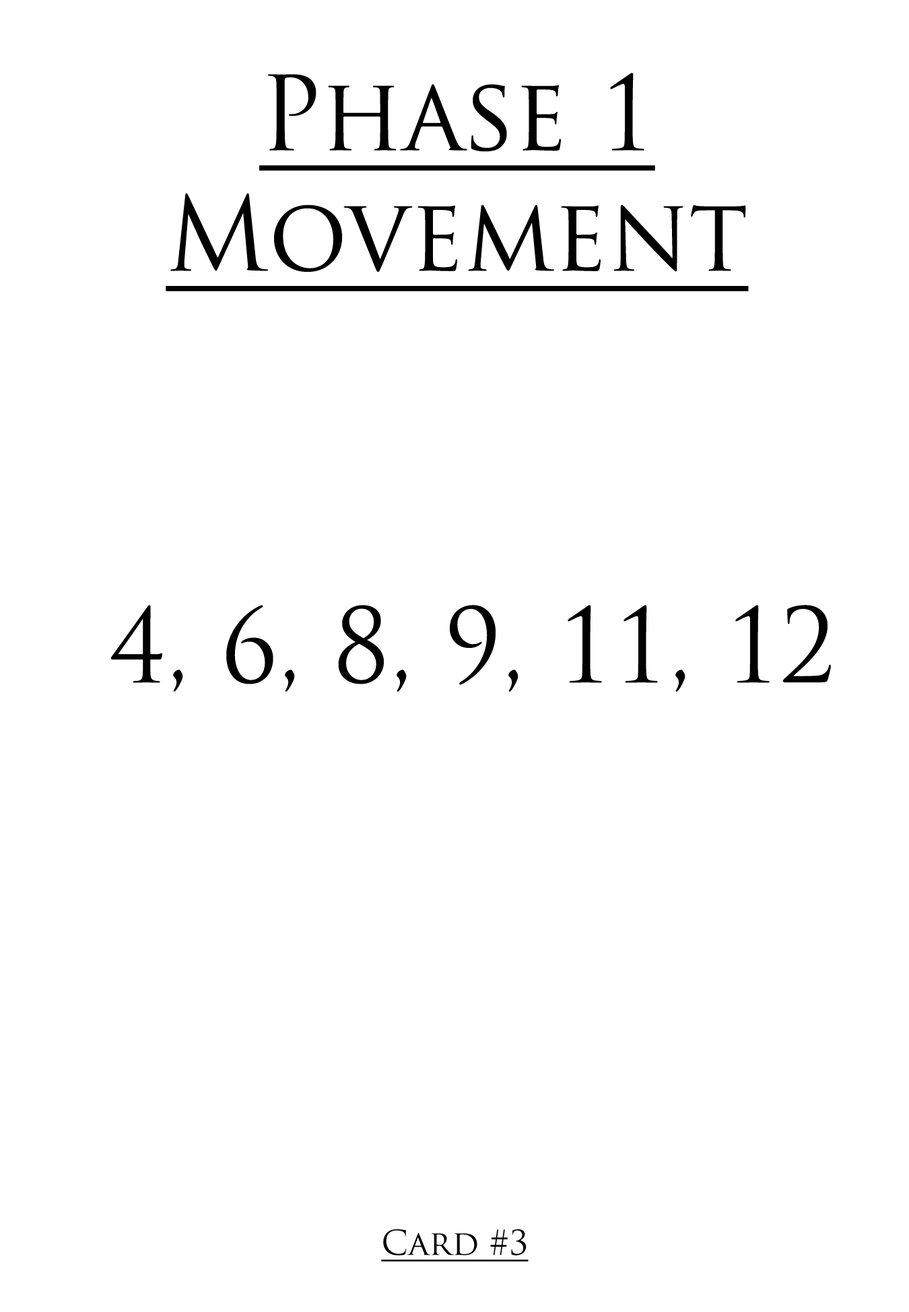
<style>
.page{position:relative;width:909px;height:1312px;background:#ffffff}
.page>*{position:absolute;margin:0}
.t1{font:100.6px "TrajanPro-Regular";color:#000000;text-decoration:underline;scale:0.97 1}
.t2{font:100.6px "TrajanPro-Regular";color:#000000;scale:0.97 1}
.t3{font:33.5px "TrajanPro-Regular";color:#000000;text-decoration:underline}
</style>
<div class="page">
<p class="t1" style="left:166px;top:73px;width:582px;height:218px;text-align:center">Phase 1<br>Movement</p>
<p class="t2" style="left:111px;top:605px;width:720px;height:87px">4, 6, 8, 9, 11, 12</p>
<p class="t3" style="left:381px;top:1230px;width:147px;height:32px">Card #3</p>
</div>
